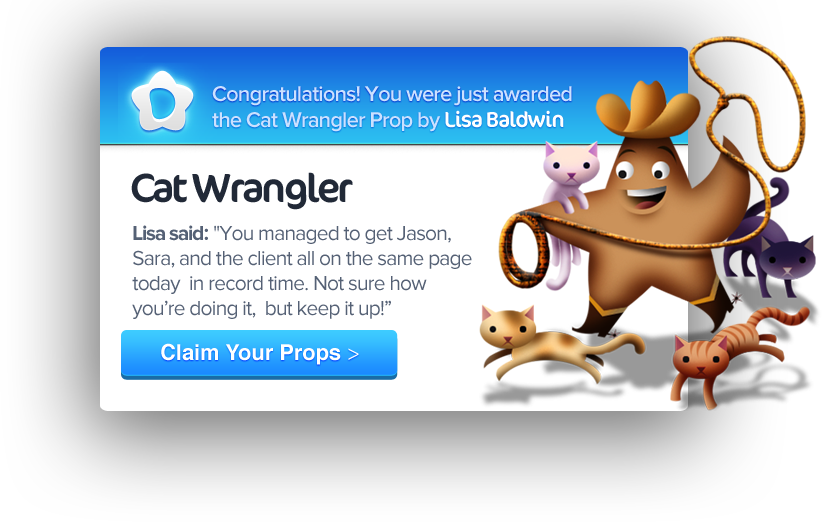
<style>
.page{position:relative;width:822px;height:522px;background:#ffffff}
.page>*{position:absolute;margin:0}
.t1{font:22px "ProximaNova-Semibold";letter-spacing:-0.04em;color:#cbe1ff}
.t2{font:22px "Cocon-Regular";letter-spacing:-0.04em;color:#ffffff}
.t3{font:41px "Cocon-Regular";letter-spacing:-0.06em;color:#212937}
.t4{font:21px "ProximaNova-Regular";letter-spacing:-0.04em;color:#556175}
.t5{font:21px "ProximaNova-Bold";letter-spacing:-0.06em;color:#556175}
.t6{font:21px "Cocon-Regular";letter-spacing:-0.06em;color:#556175}
.t7{font:21px "ProximaNova-Regular";letter-spacing:-0.01em;color:#556175}
.t8{font:21.8px "Helvetica-Bold";color:#ffffff}
.t9{font:21.8px "MyriadPro-Regular";color:#ffffff}
</style>
<div class="page">
<p class="t1" style="left:212px;top:86px;width:360px;height:46px">Congratulations! You were just awarded the Cat Wrangler Prop by <span class="t2">Lisa Baldwin</span></p>
<p class="t3" style="left:131px;top:172px;width:222px;height:38px">Cat Wrangler</p>
<p class="t4" style="left:132px;top:225px;width:340px;height:94px"><span class="t5">Lisa said</span><span class="t6">: </span>"You managed to get Jason, Sara, and the client all on the same page today  in record time. Not sure how you’re doing it,  but keep it up!<span class="t7">”</span></p>
<p class="t8" style="left:161px;top:343px;width:198px;height:22px">Claim Your Props <span class="t9">&gt;</span></p>
</div>
